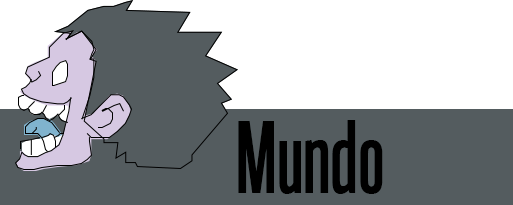
<style>
.page{position:relative;width:513px;height:205px;background:#545c5f}
.page>*{position:absolute;margin:0}
.t1{font:100px "Tandelle";color:#000000}
</style>
<div class="page">
<p class="t1" style="left:238px;top:120px;width:145px;height:74px">Mundo</p>
</div>
